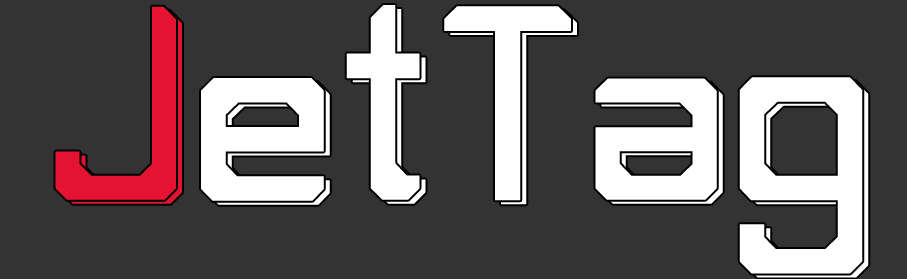
<style>
.page{position:relative;width:907px;height:279px;background:#333333}
.page>*{position:absolute;margin:0}
.t1{font:313px "Industrial";color:#ffffff}
.t2{font:313px "Industrial";color:#e31331}
.t3{font:313px "Industrial";color:#e31432}
</style>
<div class="page">
<p class="t1" style="left:55px;top:5px;width:808px;height:269px"><span class="t2">J</span>etTag</p>
<p class="t1" style="left:61px;top:9px;width:808px;height:269px"><span class="t3">J</span>etTag</p>
</div>
